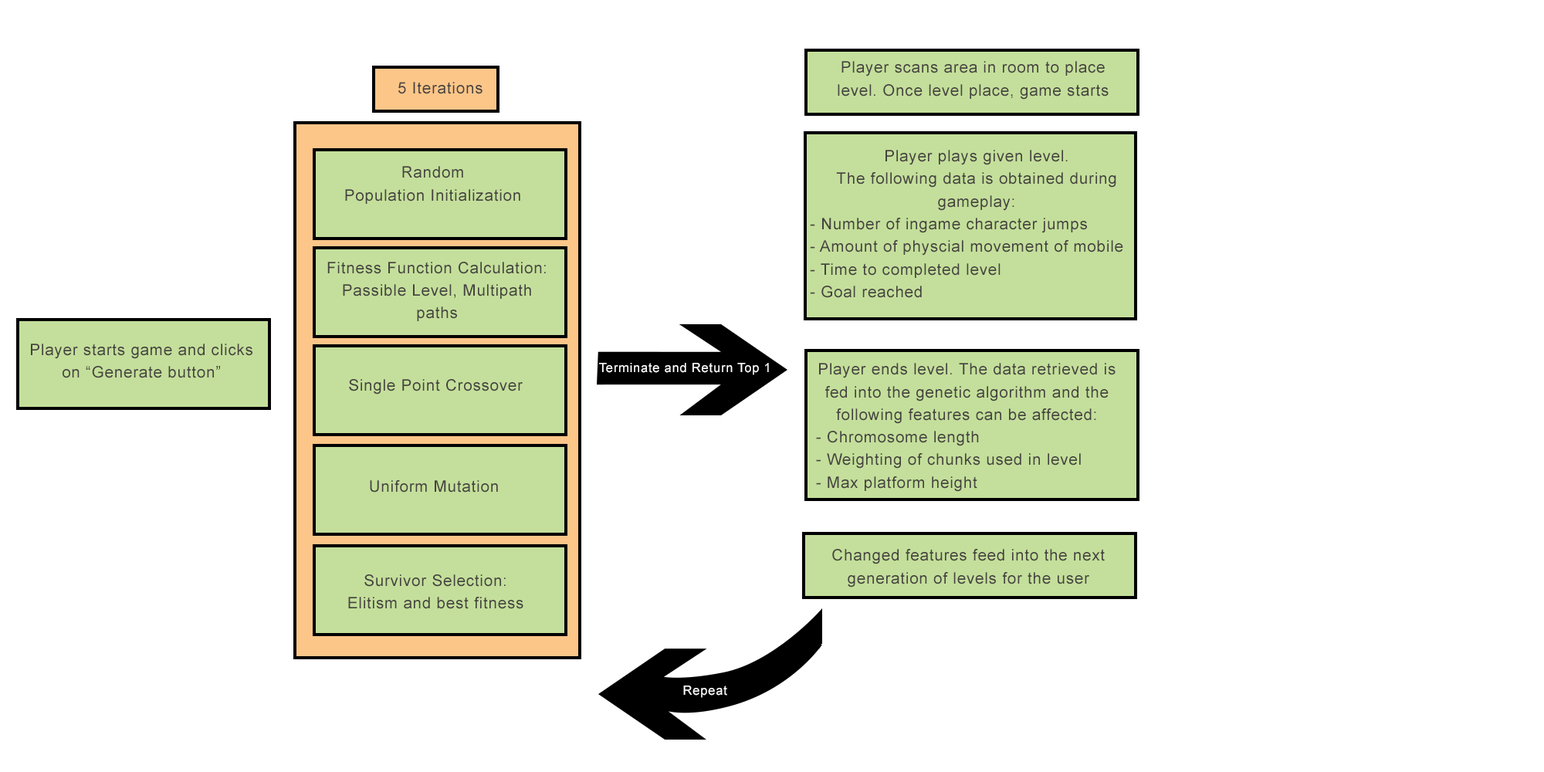
<style>
.page{position:relative;width:1544px;height:772px;background:#ffffff}
.page>*{position:absolute;margin:0}
.t1{font:15.8px/22.6px "ArialMT";letter-spacing:0.04em;color:#454240}
.t2{font:15.8px "ArialMT";letter-spacing:0.04em;color:#454240}
.t3{font:12.9px "ArialMT";letter-spacing:0.04em;color:#ffffff}
</style>
<div class="page">
<p class="t1" style="left:838px;top:61px;width:271px;height:39px;text-align:center">Player scans area in room to place level. Once level place, game starts</p>
<p class="t2" style="left:398px;top:82px;width:85px;height:12px">5 Iterations</p>
<p class="t1" style="left:810px;top:150px;width:313px;height:148px;text-align:center">Player plays given level.<br>The following data is obtained during gameplay:<br>- Number of ingame character jumps<br>- Amount of physcial movement of mobile<br>- Time to completed level<br>- Goal reached</p>
<p class="t1" style="left:345px;top:166px;width:175px;height:38px;text-align:center">Random<br>Population Initialization</p>
<p class="t1" style="left:327px;top:262px;width:219px;height:59px;text-align:center">Fitness Function Calculation:<br>Passible Level, Multipath paths</p>
<p class="t1" style="left:31px;top:344px;width:221px;height:34px;text-align:center">Player starts game and clicks on “Generate button”</p>
<p class="t3" style="left:599px;top:363px;width:170px;height:12px">Terminate and Return Top 1</p>
<p class="t1" style="left:816px;top:363px;width:300px;height:129px;text-align:center">Player ends level. The data retrieved is fed into the genetic algorithm and the following features can be affected:<br>- Chromosome length<br>- Weighting of chunks used in level<br>- Max platform height</p>
<p class="t2" style="left:349px;top:379px;width:174px;height:16px">Single Point Crossover</p>
<p class="t2" style="left:370px;top:480px;width:128px;height:13px">Uniform Mutation</p>
<p class="t1" style="left:832px;top:549px;width:273px;height:39px;text-align:center">Changed features feed into the next generation of levels for the user</p>
<p class="t1" style="left:348px;top:574px;width:176px;height:35px;text-align:center">Survivor Selection: <br>Elitism and best fitness</p>
<p class="t3" style="left:683px;top:686px;width:44px;height:12px">Repeat</p>
</div>
